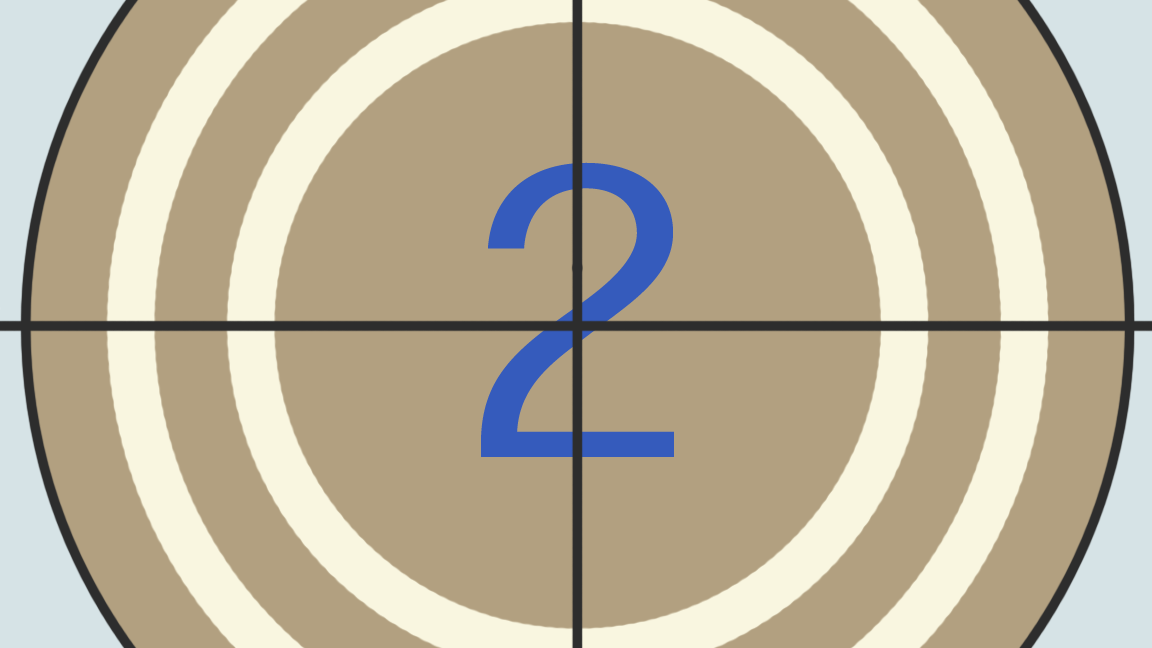
<style>
.page{position:relative;width:1152px;height:648px;background:#b2a080}
.page>*{position:absolute;margin:0}
.t1{font:400px "LetterGothicStd-Bold";letter-spacing:0.01em;color:#355bbc;scale:1.2 1}
</style>
<div class="page">
<p class="t1" style="left:481px;top:162px;width:193px;height:295px">2</p>
</div>
